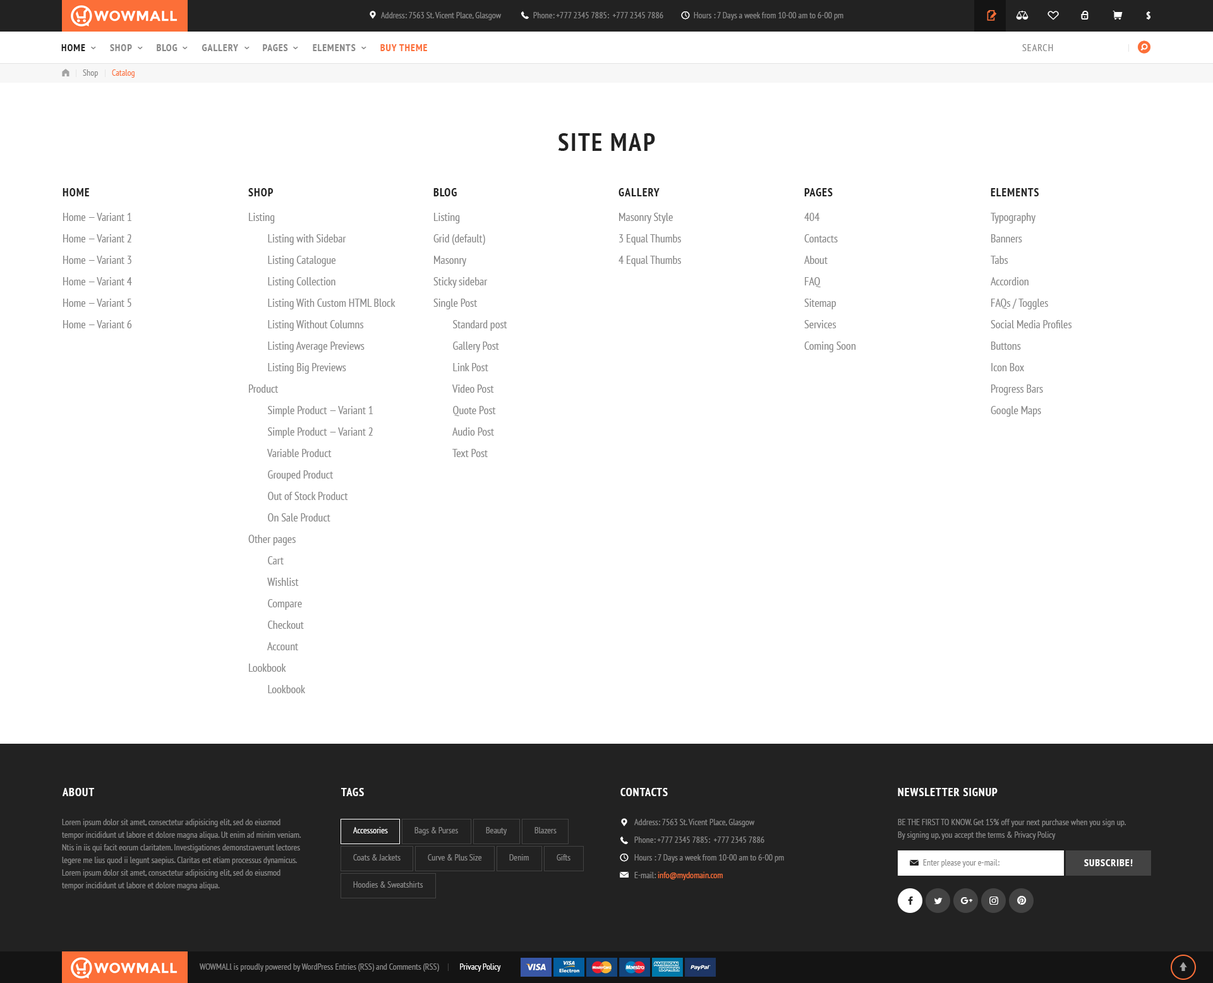
<style>
.page{position:relative;width:1213px;height:983px;background:#ffffff}
.page>*{position:absolute;margin:0}
.t1{font:8.8px "PTSans-Narrow";color:#888888}
.t2{font:10.1px "PTSans-NarrowBold";letter-spacing:0.06em;color:#ffffff;text-transform:uppercase}
.t3{font:10.1px "PTSans-NarrowBold";letter-spacing:0.06em;color:#888888;text-transform:uppercase}
.t4{font:10.1px "PTSans-NarrowBold";letter-spacing:0.06em;color:#222222;text-transform:uppercase}
.t5{font:10.1px "PTSans-NarrowBold";letter-spacing:0.06em;color:#fc6f38;text-transform:uppercase}
.t6{font:10.1px "PTSans-Narrow";letter-spacing:0.06em;color:#888888;text-transform:uppercase}
.t7{font:8.8px "PTSans-Narrow";color:#fc6f38}
.t8{font:25.3px "PTSans-NarrowBold";letter-spacing:0.06em;color:#222222;text-transform:uppercase}
.t9{font:11.4px "PTSans-NarrowBold";letter-spacing:0.06em;color:#222222;text-transform:uppercase}
.t10{font:11.4px/21.5px "PTSans-Narrow";color:#888888}
.t11{font:11.4px "PTSans-NarrowBold";letter-spacing:0.06em;color:#ffffff;text-transform:uppercase}
.t12{font:8.8px/12.6px "PTSans-Narrow";color:#888888}
.t13{font:8.8px/17.7px "PTSans-Narrow";color:#888888}
.t14{font:8.8px/17.7px "PTSans-Narrow";color:#fc6f38}
.t15{font:8.8px "PTSans-Narrow";color:#ffffff}
</style>
<div class="page">
<p class="t1" style="left:381px;top:12px;width:120px;height:8px">Address: 7563 St. Vicent Place, Glasgow</p>
<p class="t1" style="left:533px;top:12px;width:130px;height:6px">Phone: +777 2345 7885:  +777 2345 7886</p>
<p class="t1" style="left:693px;top:12px;width:150px;height:8px">Hours : 7 Days a week from 10-00 am to 6-00 pm</p>
<p class="t2" style="left:1146px;top:11px;width:4px;height:9px">$</p>
<p class="t3" style="left:61px;top:44px;width:366px;height:7px"><span class="t4">Home </span>        Shop         Blog         Gallery         Pages         elements         <span class="t5">Buy Theme</span></p>
<p class="t6" style="left:1022px;top:44px;width:31px;height:7px">Search</p>
<p class="t1" style="left:83px;top:69px;width:15px;height:9px">Shop</p>
<p class="t7" style="left:112px;top:69px;width:23px;height:9px">Catalog</p>
<p class="t8" style="left:558px;top:133px;width:97px;height:18px">Site map</p>
<p class="t9" style="left:63px;top:188px;width:26px;height:8px">Home</p>
<p class="t9" style="left:248px;top:188px;width:25px;height:8px">Shop</p>
<p class="t9" style="left:433px;top:188px;width:24px;height:8px">Blog</p>
<p class="t9" style="left:618px;top:188px;width:41px;height:8px">Gallery</p>
<p class="t9" style="left:804px;top:188px;width:28px;height:8px">Pages</p>
<p class="t9" style="left:990px;top:188px;width:49px;height:8px">Elements</p>
<p class="t10" style="left:63px;top:213px;width:69px;height:115px">Home — Variant 1<br>Home — Variant 2<br>Home — Variant 3<br>Home — Variant 4<br>Home — Variant 5<br>Home — Variant 6</p>
<p class="t10" style="left:248px;top:213px;width:147px;height:480px">Listing<br>        Listing with Sidebar <br>        Listing Catalogue <br>        Listing Collection <br>        Listing With Custom HTML Block <br>        Listing Without Columns<br>        Listing Average Previews<br>        Listing Big Previews<br>Product<br>        Simple Product — Variant 1<br>        Simple Product — Variant 2 <br>        Variable Product <br>        Grouped Product<br>        Out of Stock Product<br>        On Sale Product<br>Other pages<br>        Cart<br>        Wishlist<br>        Compare<br>        Checkout<br>        Account<br>Lookbook<br>        Lookbook</p>
<p class="t10" style="left:433px;top:213px;width:74px;height:244px">Listing<br>Grid (default)<br>Masonry<br>Sticky sidebar <br>Single Post<br>        Standard post<br>        Gallery Post<br>        Link Post<br>        Video Post<br>        Quote Post<br>        Audio Post<br>        Text Post</p>
<p class="t10" style="left:618px;top:213px;width:63px;height:54px">Masonry Style<br>3 Equal Thumbs<br>4 Equal Thumbs</p>
<p class="t10" style="left:804px;top:213px;width:52px;height:139px">404<br>Contacts<br>About<br>FAQ<br>Sitemap<br>Services<br>Coming Soon</p>
<p class="t10" style="left:990px;top:213px;width:82px;height:204px">Typography<br>Banners<br>Tabs<br>Accordion<br>FAQs / Toggles<br>Social Media Profiles<br>Buttons<br>Icon Box<br>Progress Bars<br>Google Maps</p>
<p class="t11" style="left:63px;top:788px;width:31px;height:8px">About</p>
<p class="t11" style="left:341px;top:788px;width:23px;height:8px">Tags</p>
<p class="t11" style="left:620px;top:788px;width:48px;height:8px">Contacts</p>
<p class="t11" style="left:897px;top:788px;width:100px;height:8px">NEWSLETTER SIGNUP</p>
<p class="t12" style="left:62px;top:819px;width:239px;height:72px">Lorem ipsum dolor sit amet, consectetur adipisicing elit, sed do eiusmod tempor incididunt ut labore et dolore magna aliqua. Ut enim ad minim veniam. Ntis in iis qui facit eorum claritatem. Investigationes demonstraverunt lectores legere me lius quod ii legunt saepius. Claritas est etiam processus dynamicus. Lorem ipsum dolor sit amet, consectetur adipisicing elit, sed do eiusmod tempor incididunt ut labore et dolore magna aliqua.</p>
<p class="t13" style="left:634px;top:819px;width:150px;height:61px">Address: 7563 St. Vicent Place, Glasgow<br>Phone: +777 2345 7885:  +777 2345 7886<br>Hours : 7 Days a week from 10-00 am to 6-00 pm<br>E-mail: <span class="t14">info@mydomain.com</span></p>
<p class="t12" style="left:897px;top:819px;width:228px;height:21px">BE THE FIRST TO KNOW. Get 15% off your next purchase when you sign up. <br>By signing up, you accept the terms &amp; Privacy Policy</p>
<p class="t15" style="left:353px;top:827px;width:35px;height:7px">Accessories</p>
<p class="t1" style="left:414px;top:827px;width:44px;height:9px">Bags &amp; Purses</p>
<p class="t1" style="left:486px;top:827px;width:21px;height:9px">Beauty</p>
<p class="t1" style="left:534px;top:827px;width:22px;height:7px">Blazers</p>
<p class="t1" style="left:353px;top:855px;width:47px;height:6px">Coats &amp; Jackets</p>
<p class="t1" style="left:428px;top:855px;width:54px;height:6px">Curve &amp; Plus Size</p>
<p class="t1" style="left:509px;top:855px;width:20px;height:6px">Denim</p>
<p class="t1" style="left:556px;top:855px;width:14px;height:6px">Gifts</p>
<p class="t1" style="left:923px;top:860px;width:76px;height:8px">Enter please your e-mail:</p>
<p class="t2" style="left:1084px;top:860px;width:48px;height:7px">Subscribe!</p>
<p class="t1" style="left:353px;top:882px;width:70px;height:6px">Hoodies &amp; Sweatshirts</p>
<p class="t1" style="left:199px;top:964px;width:302px;height:8px">WOWMALl is proudly powered by WordPress Entries (RSS) and Comments (RSS)           <span class="t15">Privacy Policy</span></p>
</div>
